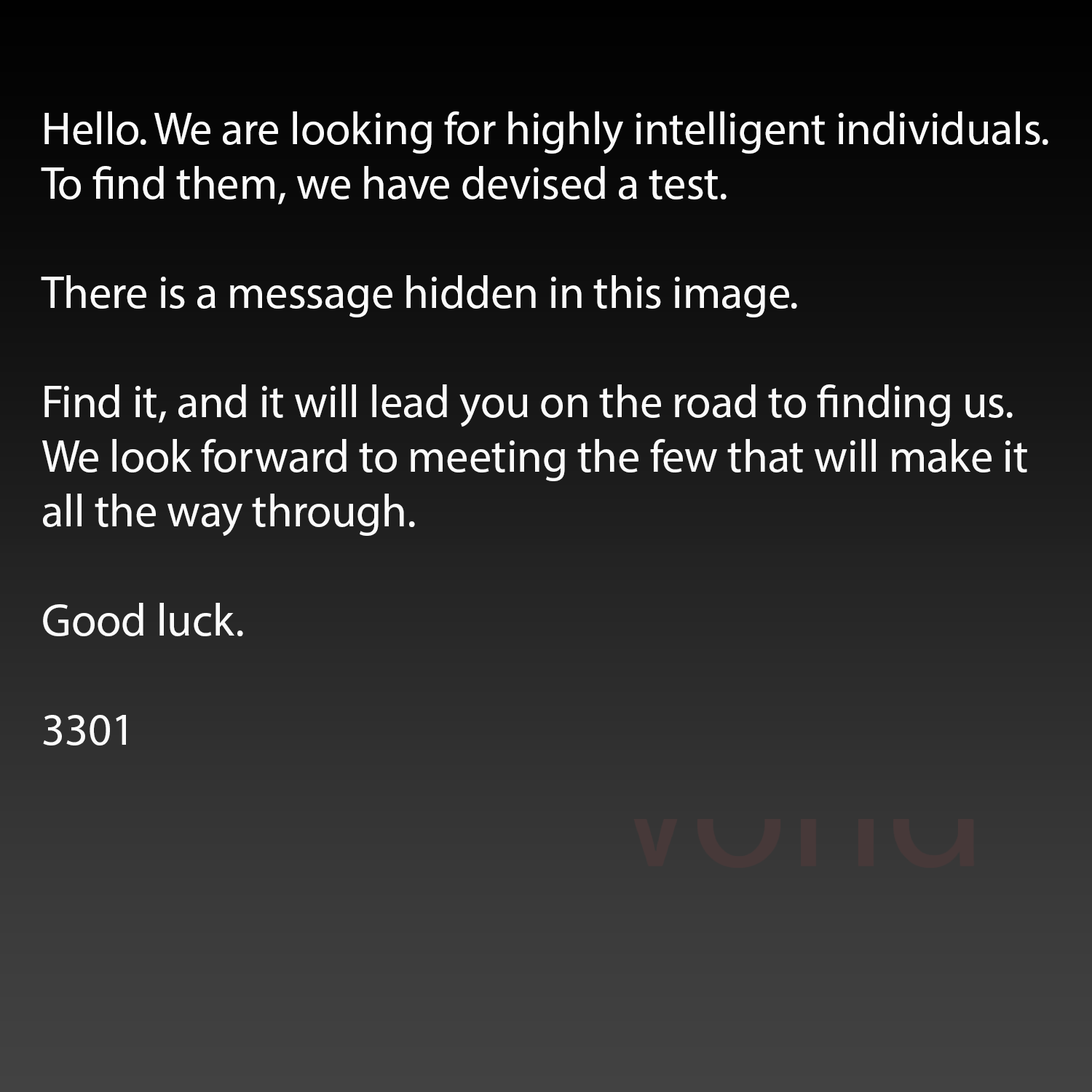
<style>
.page{position:relative;width:1092px;height:1092px}
.page>*{position:absolute;margin:0}
.t1{font:45.5px "MyriadPro-Regular";color:#fbfbfb}
</style>
<div class="page">
<p class="t1" style="left:41px;top:111px;width:1007px;height:634px">Hello. We are looking for highly intelligent individuals.<br>To find them, we have devised a test. <br><br>There is a message hidden in this image.<br><br>Find it, and it will lead you on the road to finding us.<br>We look forward to meeting the few that will make it <br>all the way through.<br><br>Good luck.<br><br>3301</p>
</div>
